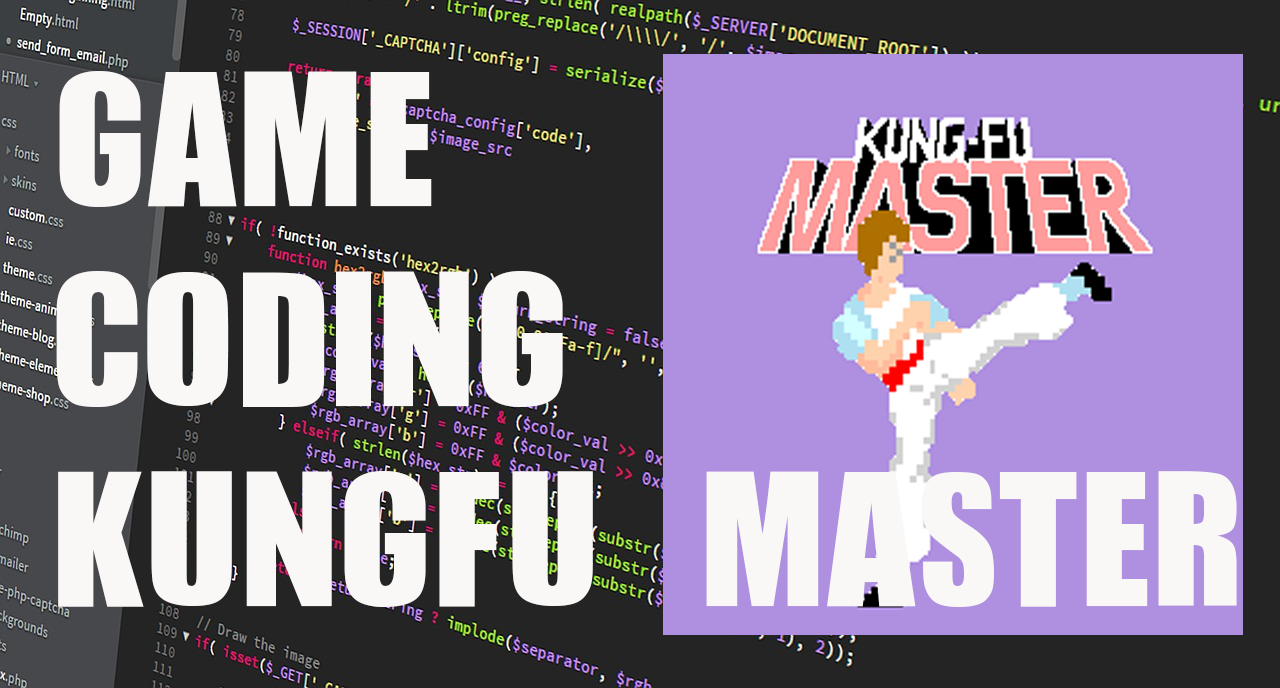
<style>
.page{position:relative;width:1280px;height:688px;background:#ae8fe0}
.page>*{position:absolute;margin:0}
.t1{font:200px/200px "JCHEadA";color:#faf7f7}
</style>
<div class="page">
<p class="t1" style="left:56px;top:71px;width:1181px;height:536px">GAME<br>CODING  <br>KUNGFU MASTER</p>
</div>
